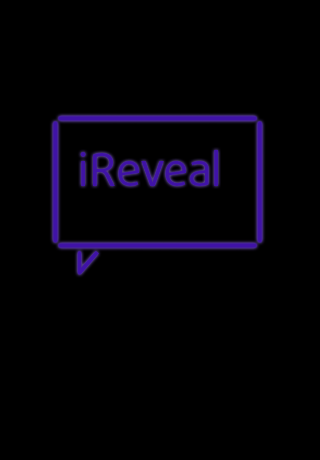
<style>
.page{position:relative;width:320px;height:460px;background:#000000}
.page>*{position:absolute;margin:0}
.t1{font:45.6px "DaxlinePro-Regular";color:#4013a7}
.t2{font:45.6px "DaxlinePro-Regular";letter-spacing:-0.05em;color:#4013a7}
.t3{font:45.6px "DaxlinePro-Regular";letter-spacing:-0.025em;color:#4013a7}
</style>
<div class="page">
<p class="t1" style="left:80px;top:150px;width:138px;height:36px">iRe<span class="t2">v</span>e<span class="t3">a</span>l</p>
</div>
